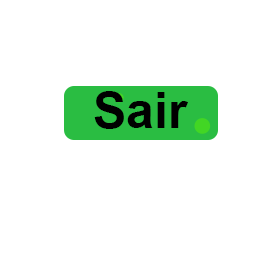
<style>
.page{position:relative;width:256px;height:256px;background:#ffffff}
.page>*{position:absolute;margin:0}
.t1{font:50px "Arial-BoldMT";color:#000000}
</style>
<div class="page">
<p class="t1" style="left:94px;top:91px;width:94px;height:38px">Sair</p>
</div>
